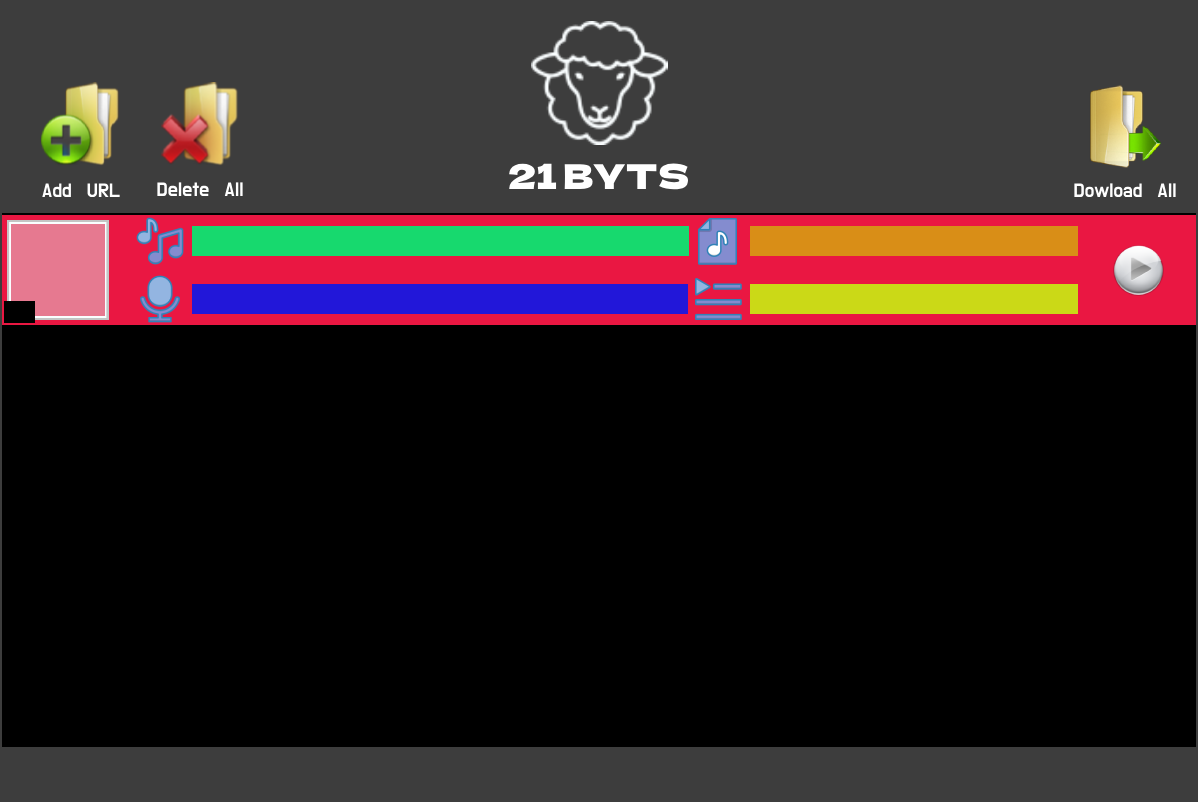
<style>
.page{position:relative;width:1198px;height:802px;background:#000000}
.page>*{position:absolute;margin:0}
.t1{font:34.3px "DelaGothicOne-Regular";color:#ffffff}
.t2{font:20px "DoHyeon-Regular";color:#ffffff}
</style>
<div class="page">
<p class="t1" style="left:509px;top:163px;width:180px;height:27px">21 BYTS</p>
<p class="t2" style="left:42px;top:183px;width:78px;height:14px">Add URL</p>
<p class="t2" style="left:157px;top:182px;width:86px;height:15px">Delete All</p>
<p class="t2" style="left:1074px;top:183px;width:102px;height:14px">Dowload All</p>
</div>
